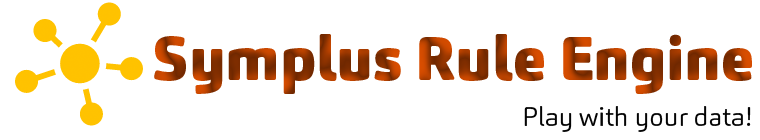
<style>
.page{position:relative;width:760px;height:140px;background:#ffffff}
.page>*{position:absolute;margin:0}
.t1{font:60.9px "Carnas-Black"}
.t2{font:26.1px "Carnas-Light";color:#040404}
</style>
<div class="page">
<p class="t1" style="left:154px;top:34px;width:598px;height:60px">Symplus Rule Engine</p>
<p class="t2" style="left:524px;top:106px;width:227px;height:26px">Play with your data!</p>
</div>
